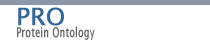
<style>
.page{position:relative;width:210px;height:40px;background:#ffffff}
.page>*{position:absolute;margin:0}
.t1{font:24px "LucidaSans";color:#336699;font-weight:bold}
.t2{font:13.5px "LucidaSans";letter-spacing:0.01em;color:#666666;font-weight:bold;scale:0.67 1}
</style>
<div class="page">
<p class="t1" style="left:16px;top:4px;width:49px;height:26px">PRO</p>
<p class="t2" style="left:16px;top:25px;width:79px;height:15px">Protein Ontology</p>
</div>
